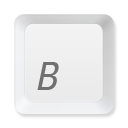
<style>
.page{position:relative;width:128px;height:128px;background:#ffffff}
.page>*{position:absolute;margin:0}
.t1{font:39.4px "UniversLT-CondensedOblique";color:#707070}
</style>
<div class="page">
<p class="t1" style="left:37px;top:62px;width:22px;height:28px">B</p>
</div>
